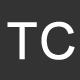
<style>
.page{position:relative;width:80px;height:80px;background:#333333}
.page>*{position:absolute;margin:0}
.t1{font:51px "ArialMT";color:#ffffff;font-weight:bold}
</style>
<div class="page">
<p class="t1" style="left:7px;top:21px;width:68px;height:39px">TC</p>
</div>
